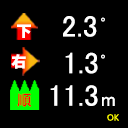
<style>
.page{position:relative;width:128px;height:128px;background:#000000}
.page>*{position:absolute;margin:0}
.t1{font:30px "MS-PGothic";color:#ffffff}
.t2{font:15px "MS-PGothic";color:#ffffff}
.t3{font:20px "MS-PGothic";color:#ffffff}
.t4{font:8.9px "MicrosoftNewTaiLue";color:#ffff00}
</style>
<div class="page">
<p class="t1" style="left:63px;top:16px;width:34px;height:21px">2.3</p>
<p class="t2" style="left:101px;top:17px;width:4px;height:5px">°</p>
<p class="t1" style="left:65px;top:52px;width:33px;height:22px">1.3</p>
<p class="t2" style="left:101px;top:54px;width:4px;height:5px">°</p>
<p class="t1" style="left:50px;top:85px;width:48px;height:21px">11.3</p>
<p class="t3" style="left:102px;top:96px;width:13px;height:10px">m</p>
<p class="t4" style="left:107px;top:114px;width:12px;height:7px">OK</p>
</div>
